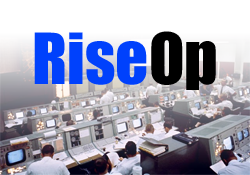
<style>
.page{position:relative;width:250px;height:175px}
.page>*{position:absolute;margin:0}
.t1{font:65px "Impact";color:#0041fc}
.t2{font:65px "Impact";color:#000000}
</style>
<div class="page">
<p class="t1" style="left:34px;top:31px;width:182px;height:59px">Rise<span class="t2">Op</span></p>
</div>
